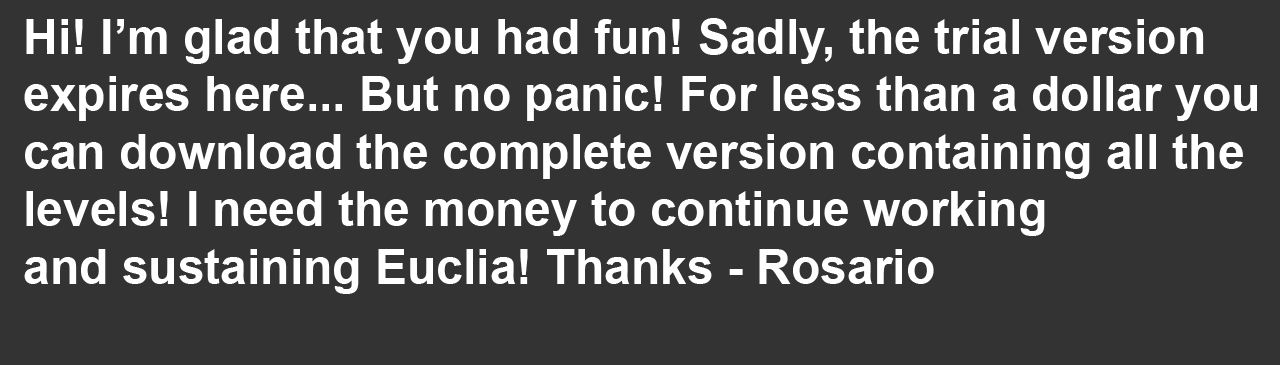
<style>
.page{position:relative;width:1280px;height:365px;background:#333333}
.page>*{position:absolute;margin:0}
.t1{font:48px "Arial-BoldMT";color:#ffffff}
</style>
<div class="page">
<p class="t1" style="left:24px;top:18px;width:1233px;height:276px">Hi! I’m glad that you had fun! Sadly, the trial version<br>expires here... But no panic! For less than a dollar you<br>can download the complete version containing all the<br>levels! I need the money to continue working<br>and sustaining Euclia! Thanks - Rosario</p>
</div>
